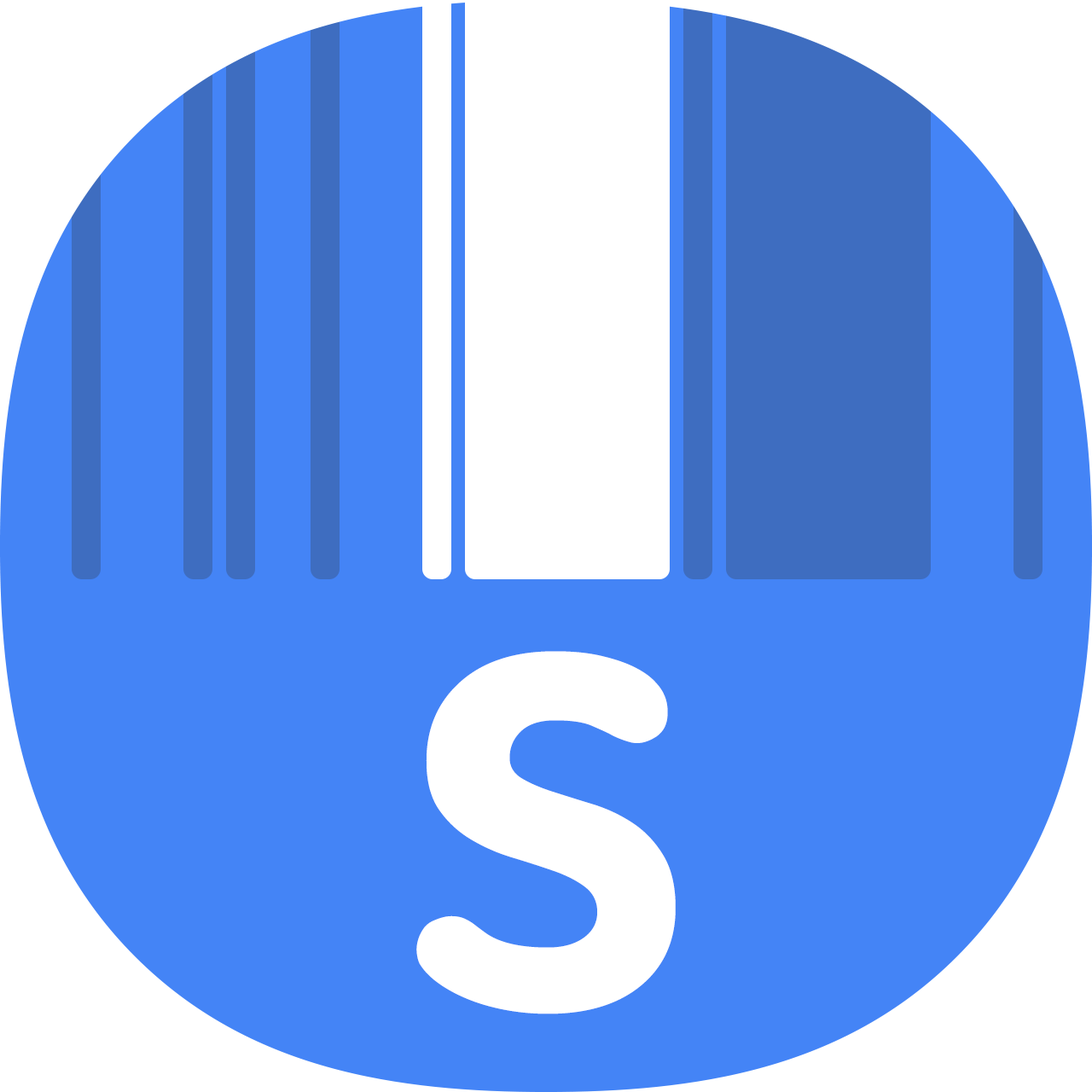
<style>
.page{position:relative;width:1092px;height:1092px;background:#4484f6}
.page>*{position:absolute;margin:0}
.t1{font:696.7px "UbuntuTitling-Bold";letter-spacing:0.025em;color:#ffffff}
</style>
<div class="page">
<p class="t1" style="left:416px;top:651px;width:260px;height:363px">s</p>
</div>
